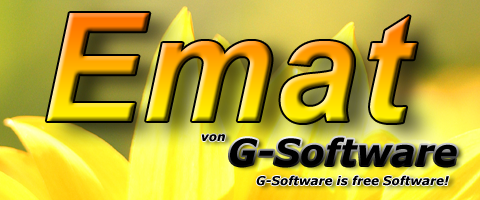
<style>
.page{position:relative;width:480px;height:200px}
.page>*{position:absolute;margin:0}
.t1{font:150px "Arial-BoldItalicMT"}
.t2{font:12px "Verdana-BoldItalic";color:#000000}
.t3{font:36px "Verdana-BoldItalic";color:#000000}
</style>
<div class="page">
<p class="t1" style="left:46px;top:13px;width:371px;height:110px">Emat</p>
<p class="t2" style="left:201px;top:134px;width:24px;height:8px">von</p>
<p class="t3" style="left:230px;top:137px;width:227px;height:29px">G-Software</p>
<p class="t2" style="left:256px;top:175px;width:193px;height:11px">G-Software is free Software!</p>
</div>
